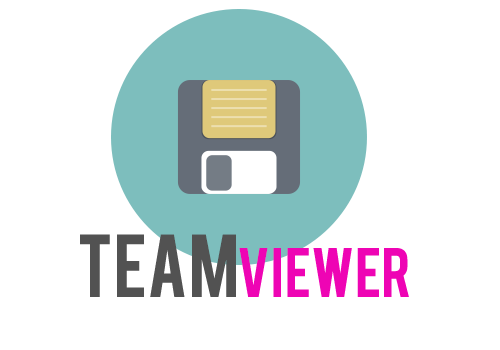
<style>
.page{position:relative;width:500px;height:350px;background:#ffffff}
.page>*{position:absolute;margin:0}
.t1{font:70px "Bebas";color:#525252}
.t2{font:55px "Bebas";color:#ee04b4}
</style>
<div class="page">
<p class="t1" style="left:80px;top:234px;width:156px;height:63px">team</p>
<p class="t2" style="left:239px;top:248px;width:170px;height:49px">viewer</p>
</div>
